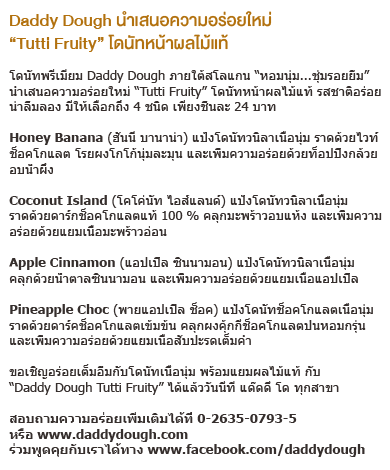
<style>
.page{position:relative;width:390px;height:470px;background:#ffffff}
.page>*{position:absolute;margin:0}
.t1{font:13px "Tahoma";color:#362f2d}
.t2{font:24px/23px "DBHelvethaicaX-65Med";color:#b2710e}
.t3{font:13px "Tahoma-Bold";color:#362f2d}
</style>
<div class="page">
<p class="t1" style="left:8px;top:11px;width:374px;height:446px"><span class="t2">Daddy Dough นำเสนอความอร่อยใหม่<br>“Tutti Fruity” โดนัทหน้าผลไม้แท้<br></span><br>โดนัทพรีเมี่ยม Daddy Dough ภายใต้สโลแกน “หอมนุ่ม...ชุ่มรอยยิ้ม” <br>นำเสนอความอร่อยใหม่ “Tutti Fruity” โดนัทหน้าผลไม้แท้ รสชาติอร่อย<br>น่าลิ้มลอง มีให้เลือกถึง 4 ชนิด เพียงชิ้นละ 24 บาท<br><span class="t3"><br>Honey Banana</span> (ฮันนี่ บานาน่า) แป้งโดนัทวนิลาเนื้อนุ่ม ราดด้วยไวท์<br>ช็อคโกแลต โรยผงโกโก้นุ่มละมุน และเพิ่มความอร่อยด้วยท็อปปิ้งกล้วย<br>อบน้ำผึ้ง<br><br><span class="t3">Coconut Island</span> (โคโค่นัท ไอส์แลนด์) แป้งโดนัทวนิลาเนื้อนุ่ม <br>ราดด้วยดาร์กช็อคโกแลตแท้ 100 % คลุกมะพร้าวอบแห้ง และเพิ่มความ<br>อร่อยด้วยแยมเนื้อมะพร้าวอ่อน <br> <br><span class="t3">Apple Cinnamon</span> (แอปเปิ้ล ซินนามอน) แป้งโดนัทวนิลาเนื้อนุ่ม<br>คลุกด้วยน้ำตาลซินนามอน และเพิ่มความอร่อยด้วยแยมเนื้อแอปเปิ้ล<br> <br><span class="t3">Pineapple Choc</span> (พายแอปเปิ้ล ช็อค) แป้งโดนัทช็อคโกแลตเนื้อนุ่ม<br>ราดด้วยดาร์คช็อคโกแลตเข้มข้น คลุกผงคุ้กกี้ช็อคโกแลตป่นหอมกรุ่น <br>และเพิ่มความอร่อยด้วยแยมเนื้อสับปะรดเต็มคำ<br><br>ขอเชิญอร่อยเต็มอิ่มกับโดนัทเนื้อนุ่ม พร้อมแยมผลไม้แท้ กับ<br>“Daddy Dough Tutti Fruity” ได้แล้ววันนี้ที่ แด๊ดดี้ โด ทุกสาขา<br><br><span class="t3">สอบถามความอร่อยเพิ่มเติมได้ที่ 0-2635-0793-5<br>หรือ www.daddydough.com<br>ร่วมพูดคุยกับเราได้ทาง www.facebook.com/daddydough</span></p>
</div>
